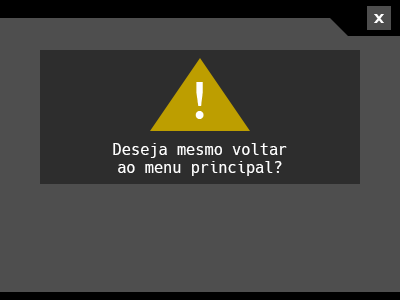
<style>
.page{position:relative;width:400px;height:300px;background:#4e4e4e}
.page>*{position:absolute;margin:0}
.t1{font:22.2px "koliko-Regular";letter-spacing:0.06em;color:#ffffff}
.t2{font:15.3px "Hack-Regular";color:#ffffff}
</style>
<div class="page">
<p class="t1" style="left:374px;top:14px;width:10px;height:9px">x</p>
<p class="t2" style="left:113px;top:143px;width:174px;height:33px;text-align:center">Deseja mesmo voltar<br>ao menu principal?</p>
</div>
